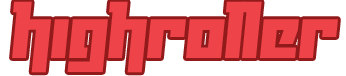
<style>
.page{position:relative;width:346px;height:76px;background:#ed4349}
.page>*{position:absolute;margin:0}
.t1{font:72px "Yukarimobile";color:#ed4349}
</style>
<div class="page">
<p class="t1" style="left:12px;top:1px;width:326px;height:72px">highroller</p>
</div>
